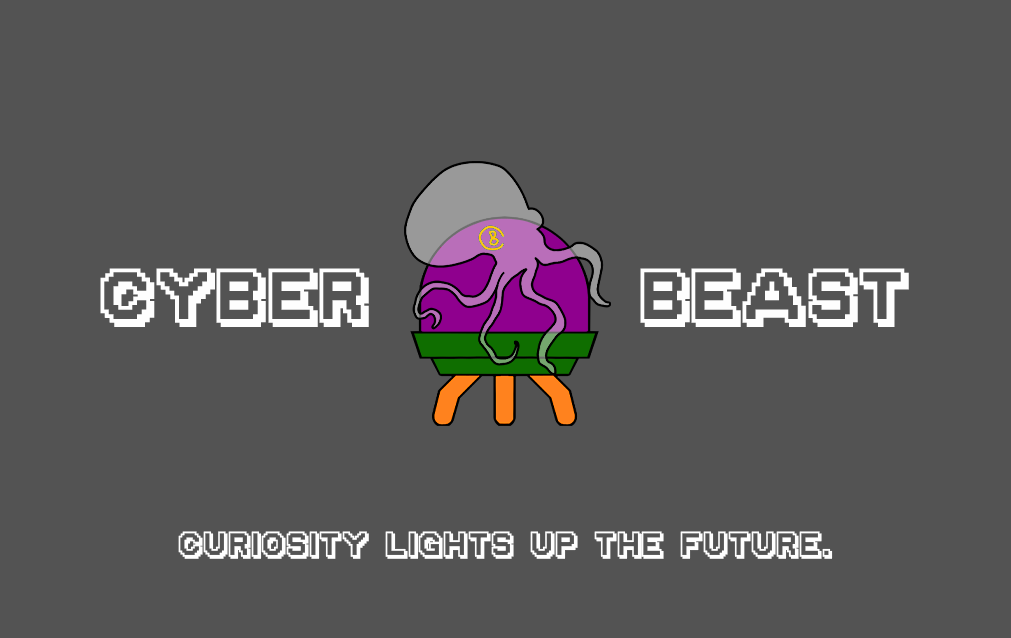
<style>
.page{position:relative;width:1011px;height:638px;background:#535353}
.page>*{position:absolute;margin:0}
.t1{font:75px "Golden-Age";letter-spacing:-0.01em;color:#fefefe}
.t2{font:35px "Golden-Age";letter-spacing:-0.01em;color:#fefefe;scale:0.95 1}
</style>
<div class="page">
<p class="t1" style="left:100px;top:268px;width:809px;height:59px">CYBER         BEAST</p>
<p class="t2" style="left:178px;top:531px;width:655px;height:28px">Curiosity  lights  up  the  future.</p>
</div>
